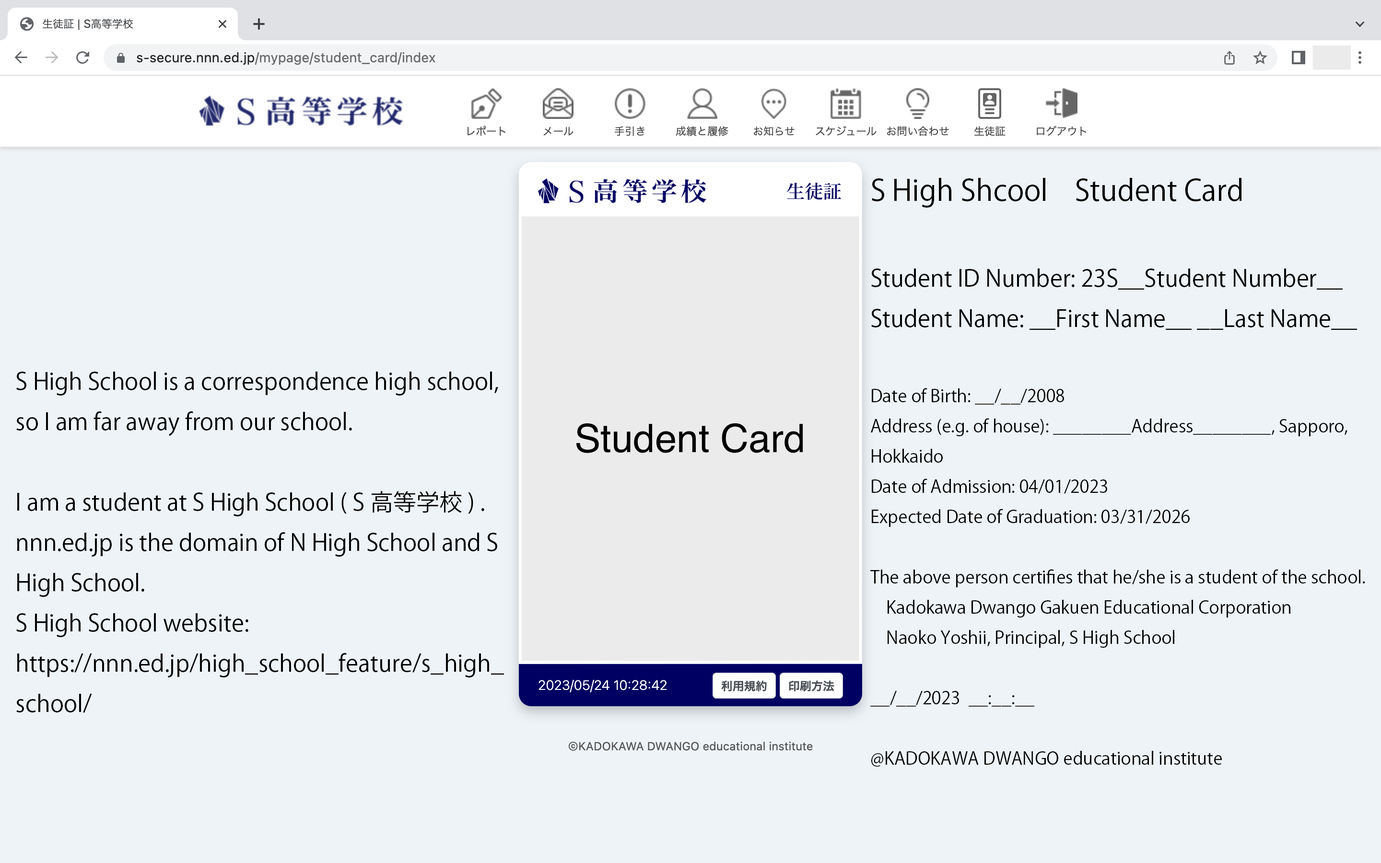
<style>
.page{position:relative;width:1381px;height:863px;background:#eef3f7}
.page>*{position:absolute;margin:0}
.t1{font:17.3px "KozGoPr6N-Regular";color:#000000}
.t2{font:28.8px "KozGoPr6N-Regular";color:#000000}
.t3{font:23px "KozGoPr6N-Regular";color:#000000}
</style>
<div class="page">
<p class="t1" style="left:870px;top:178px;width:495px;height:589px"><span class="t2">S High Shcool    Student Card<br></span><span class="t3"><br>Student ID Number: 23S__Student Number__<br>Student Name: __First Name__ __Last Name__<br><br></span>Date of Birth: __/__/2008<br>Address (e.g. of house): ________Address________, Sapporo, Hokkaido<br>Date of Admission: 04/01/2023<br>Expected Date of Graduation: 03/31/2026<br><br>The above person certifies that he/she is a student of the school.<br>    Kadokawa Dwango Gakuen Educational Corporation<br>    Naoko Yoshii, Principal, S High School<br><br>__/__/2023  __:__:__<br><br>@KADOKAWA DWANGO educational institute</p>
<p class="t3" style="left:16px;top:372px;width:488px;height:341px">S High School is a correspondence high school, so I am far away from our school.<br><br>I am a student at S High School ( S 高等学校 ) .<br>nnn.ed.jp is the domain of N High School and S High School.<br>S High School website: https://nnn.ed.jp/high_school_feature/s_high_school/</p>
</div>
